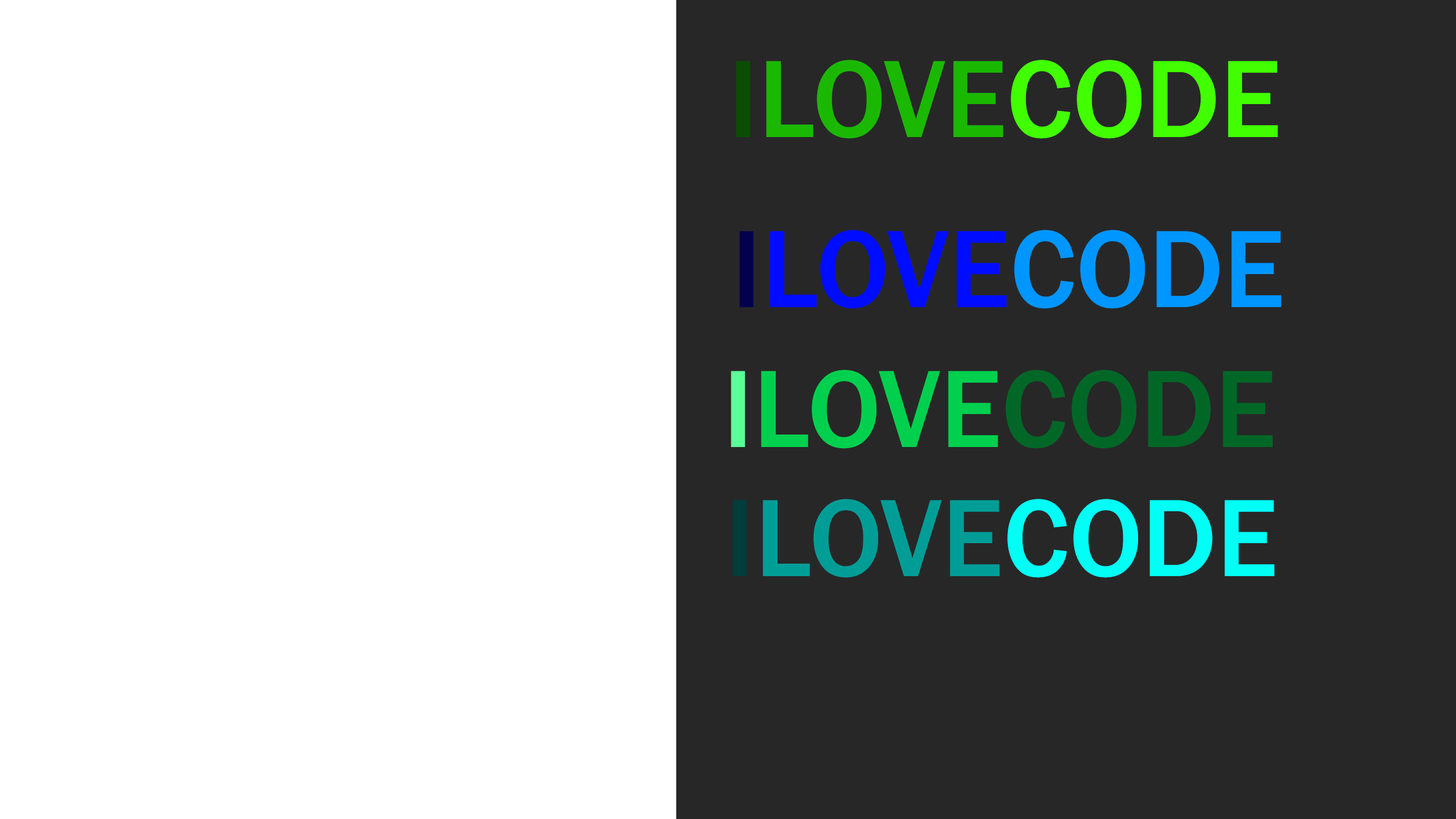
<style>
.page{position:relative;width:1456px;height:819px;background:#ffffff}
.page>*{position:absolute;margin:0}
.t1{font:113.7px "FranklinGothic-Medium";color:#1bb801;text-transform:uppercase}
.t2{font:113.7px "FranklinGothic-Medium";color:#0c4e01;text-transform:uppercase}
.t3{font:113.7px "FranklinGothic-Medium";color:#42ff00;text-transform:uppercase}
.t4{font:113.7px "FranklinGothic-Medium";color:#000cff;text-transform:uppercase}
.t5{font:113.7px "FranklinGothic-Medium";color:#03014e;text-transform:uppercase}
.t6{font:113.7px "FranklinGothic-Medium";color:#0096ff;text-transform:uppercase}
.t7{font:113.7px "FranklinGothic-Medium";color:#00d04e;text-transform:uppercase}
.t8{font:113.7px "FranklinGothic-Medium";color:#5aff98;text-transform:uppercase}
.t9{font:113.7px "FranklinGothic-Medium";color:#016727;text-transform:uppercase}
.t10{font:113.7px "FranklinGothic-Medium";color:#009d97;text-transform:uppercase}
.t11{font:113.7px "FranklinGothic-Medium";color:#013d3b;text-transform:uppercase}
.t12{font:113.7px "FranklinGothic-Medium";color:#01fff6;text-transform:uppercase}
</style>
<div class="page">
<p class="t1" style="left:736px;top:60px;width:542px;height:79px"><span class="t2">I</span>Love<span class="t3">Code</span></p>
<p class="t4" style="left:739px;top:230px;width:542px;height:79px"><span class="t5">I</span>Love<span class="t6">Code</span></p>
<p class="t7" style="left:731px;top:370px;width:542px;height:79px"><span class="t8">I</span>Love<span class="t9">Code</span></p>
<p class="t10" style="left:733px;top:499px;width:542px;height:79px"><span class="t11">I</span>Love<span class="t12">Code</span></p>
</div>
